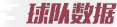
<style>
.page{position:relative;width:117px;height:27px;background:#954350}
.page>*{position:absolute;margin:0}
.t1{font:22px "MFLiHei_Noncommercial-Regular";color:#954350;font-style:italic}
</style>
<div class="page">
<p class="t1" style="left:26px;top:2px;width:91px;height:22px">球队数据</p>
</div>
